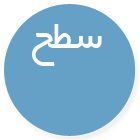
<style>
.page{position:relative;width:140px;height:140px;background:#65a1c6}
.page>*{position:absolute;margin:0}
.t1{font:42px "BYekan";color:#ffffff}
</style>
<div class="page">
<p class="t1" style="left:32px;top:24px;width:70px;height:42px">سطح</p>
</div>
